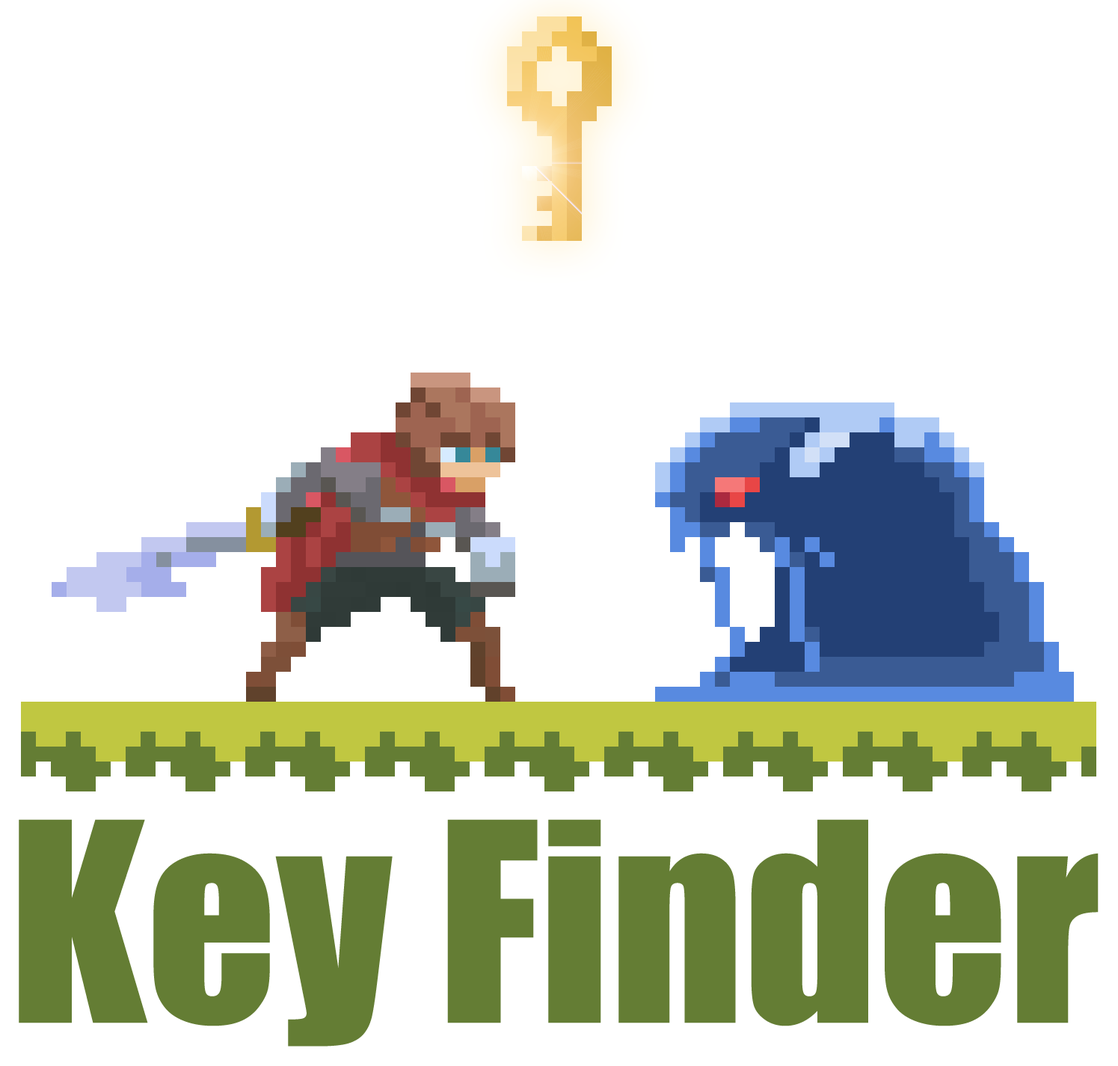
<style>
.page{position:relative;width:1118px;height:1066px;background:#ffffff}
.page>*{position:absolute;margin:0}
.t1{font:256.6px "Impact";color:#647d34}
</style>
<div class="page">
<p class="t1" style="left:19px;top:819px;width:1080px;height:228px">Key Finder</p>
</div>
